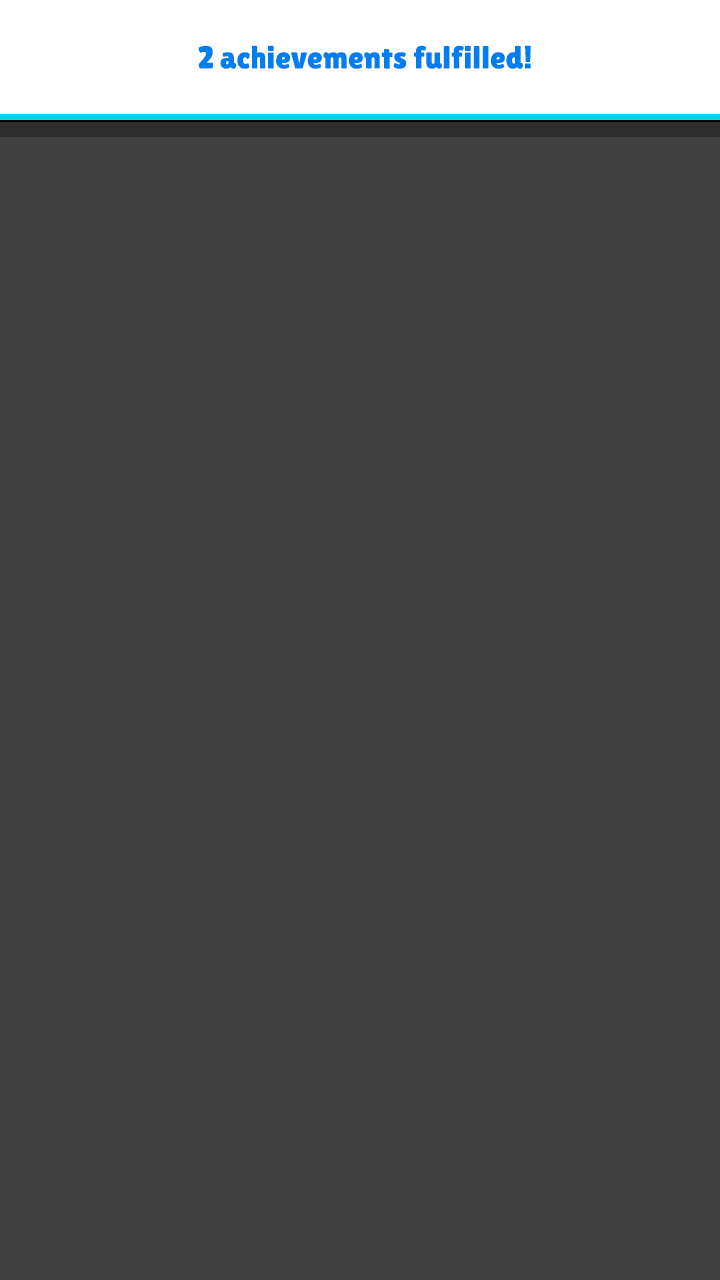
<style>
.page{position:relative;width:720px;height:1280px;background:#414041}
.page>*{position:absolute;margin:0}
.t1{font:32px "LilitaOne";color:#007def}
</style>
<div class="page">
<p class="t1" style="left:198px;top:45px;width:333px;height:24px">2 achievements fulfilled!</p>
</div>
